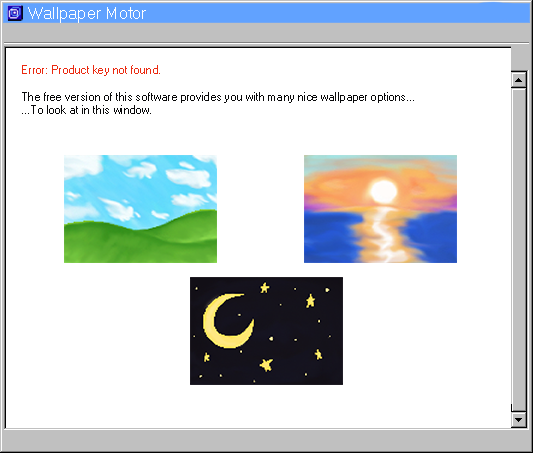
<style>
.page{position:relative;width:533px;height:453px;background:#ffffff}
.page>*{position:absolute;margin:0}
.t1{font:16.3px "MicrosoftSansSerif";color:#ffffff}
.t2{font:11px "MicrosoftSansSerif";color:#080809}
.t3{font:11px "MicrosoftSansSerif";color:#eb2a10}
</style>
<div class="page">
<p class="t1" style="left:28px;top:7px;width:118px;height:16px">Wallpaper Motor</p>
<p class="t2" style="left:22px;top:65px;width:392px;height:49px"><span class="t3">Error: Product key not found.<br></span><br>The free version of this software provides you with many nice wallpaper options...<br>...To look at in this window.</p>
</div>
